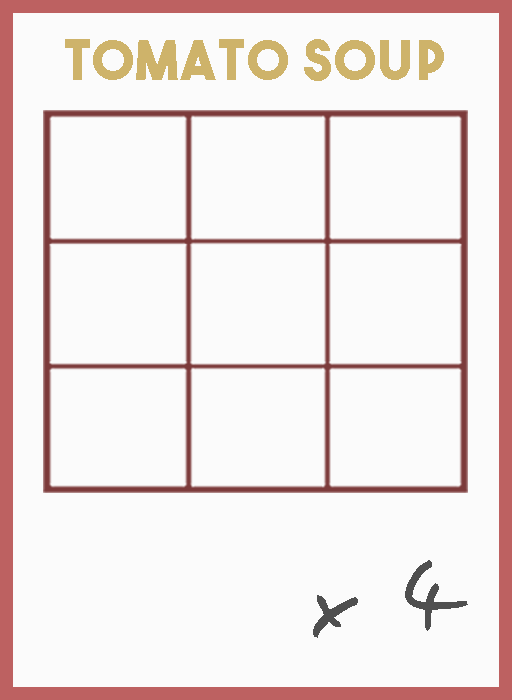
<style>
.page{position:relative;width:512px;height:700px;background:#fbfbfb}
.page>*{position:absolute;margin:0}
.t1{font:54.5px "TheBoldFont";letter-spacing:0.05em;color:#ceb36a}
.t2{font:106.1px "EasySpeech";letter-spacing:0.05em;color:#4f4f4f}
</style>
<div class="page">
<p class="t1" style="left:65px;top:39px;width:379px;height:42px">tomato soup</p>
<p class="t2" style="left:313px;top:560px;width:155px;height:78px">x 4</p>
</div>
